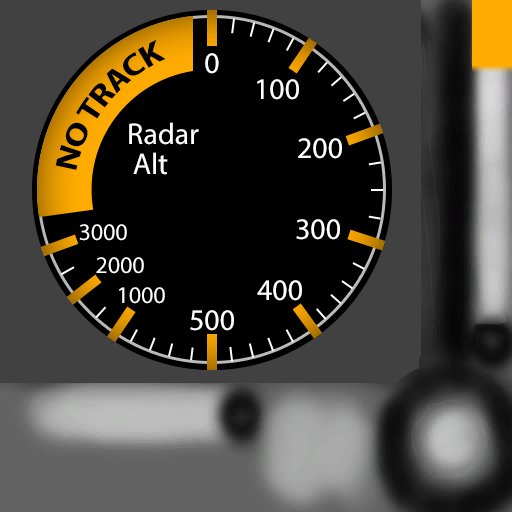
<style>
.page{position:relative;width:512px;height:512px;background:#000000}
.page>*{position:absolute;margin:0}
.t1{font:30px "MyriadPro-Regular";color:#ffffff}
.t2{font:30px/30px "MyriadPro-Regular";color:#ffffff}
.t3{font:24px "MyriadPro-Regular";color:#ffffff}
</style>
<div class="page">
<p class="t1" style="left:205px;top:53px;width:14px;height:21px">0</p>
<p class="t1" style="left:257px;top:79px;width:42px;height:21px">100</p>
<p class="t2" style="left:129px;top:122px;width:70px;height:53px;text-align:center">Radar<br>Alt</p>
<p class="t1" style="left:298px;top:138px;width:44px;height:21px">200</p>
<p class="t1" style="left:296px;top:219px;width:44px;height:21px">300</p>
<p class="t3" style="left:79px;top:224px;width:48px;height:17px">3000</p>
<p class="t3" style="left:96px;top:257px;width:48px;height:17px">2000</p>
<p class="t1" style="left:257px;top:280px;width:45px;height:21px">400</p>
<p class="t3" style="left:119px;top:287px;width:46px;height:17px">1000</p>
<p class="t1" style="left:190px;top:310px;width:44px;height:21px">500</p>
</div>
